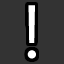
<style>
.page{position:relative;width:64px;height:64px;background:#333333}
.page>*{position:absolute;margin:0}
.t1{font:75px "Leelawadee";color:#ffffff}
</style>
<div class="page">
<p class="t1" style="left:27px;top:5px;width:9px;height:54px">!</p>
</div>
